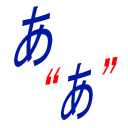
<style>
.page{position:relative;width:128px;height:128px;background:#ffffff}
.page>*{position:absolute;margin:0}
.t1{font:69.7px "MS-Gothic";color:#0218a1;scale:0.67 1}
.t2{font:65.3px "MS-Gothic";color:#ff0000;scale:0.59 1}
.t3{font:65.3px "MS-Gothic";color:#0218a1;scale:0.59 1}
</style>
<div class="page">
<p class="t1" style="left:14px;top:6px;width:39px;height:61px;rotate:-10deg">あ</p>
<p class="t2" style="left:45px;top:56px;width:73px;height:64px;rotate:-10deg">“<span class="t3">あ</span>”</p>
</div>
